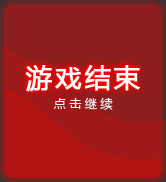
<style>
.page{position:relative;width:166px;height:182px;background:#8e1d1d}
.page>*{position:absolute;margin:0}
.t1{font:26px "MicrosoftYaHei";letter-spacing:0.1em;color:#ffffff;font-weight:bold}
.t2{font:12px "MicrosoftYaHei";letter-spacing:0.3em;color:#ffffff}
</style>
<div class="page">
<p class="t1" style="left:25px;top:65px;width:115px;height:27px">游戏结束</p>
<p class="t2" style="left:54px;top:97px;width:59px;height:13px">点击继续</p>
</div>
